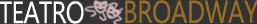
<style>
.page{position:relative;width:257px;height:24px;background:#333333}
.page>*{position:absolute;margin:0}
.t1{font:30.8px "Ebrima";letter-spacing:-0.025em;color:#ffffff;scale:0.81 1}
.t2{font:31.6px "Ebrima";letter-spacing:-0.01em;color:#996e24;scale:0.8 1}
</style>
<div class="page">
<p class="t1" style="left:0px;top:1px;width:84px;height:23px">TEATRO</p>
<p class="t2" style="left:125px;top:0px;width:133px;height:24px">BROADWAY</p>
</div>
